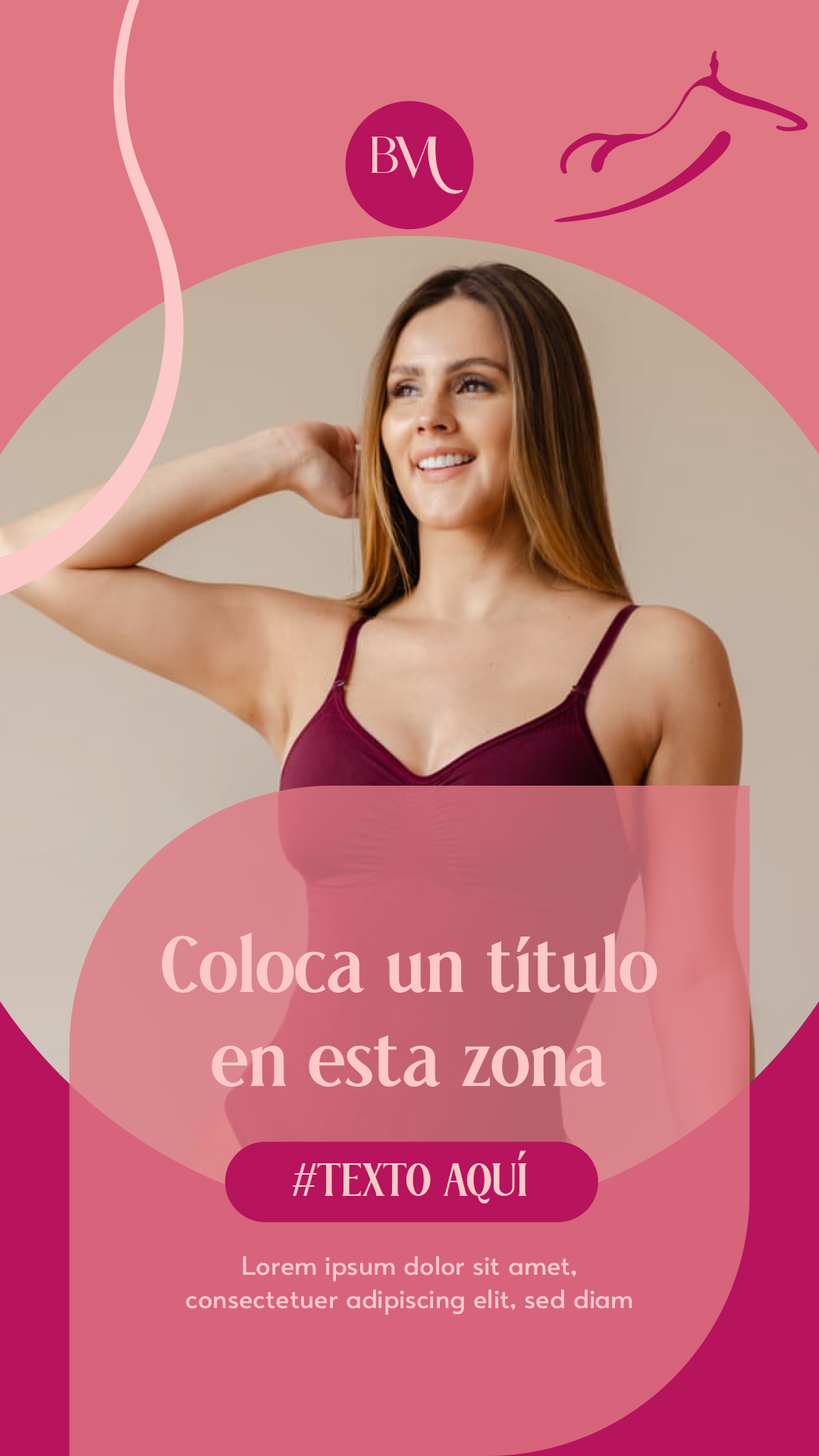
<style>
.page{position:relative;width:819px;height:1456px}
.page>*{position:absolute;margin:0}
.t1{font:78.9px "alinia-Regular";color:#fcc8c8}
.t2{font:46.3px "alinia-Regular";color:#fdc9c9}
.t3{font:28.1px "QloudyRegular";color:#fdc9c9}
</style>
<div class="page">
<p class="t1" style="left:162px;top:933px;width:495px;height:154px;text-align:center">Coloca un título<br>en esta zona</p>
<p class="t2" style="left:293px;top:1150px;width:234px;height:53px">#TEXTO AQUÍ</p>
<p class="t3" style="left:186px;top:1256px;width:446px;height:59px;text-align:center">Lorem ipsum dolor sit amet, consectetuer adipiscing elit, sed diam</p>
</div>
